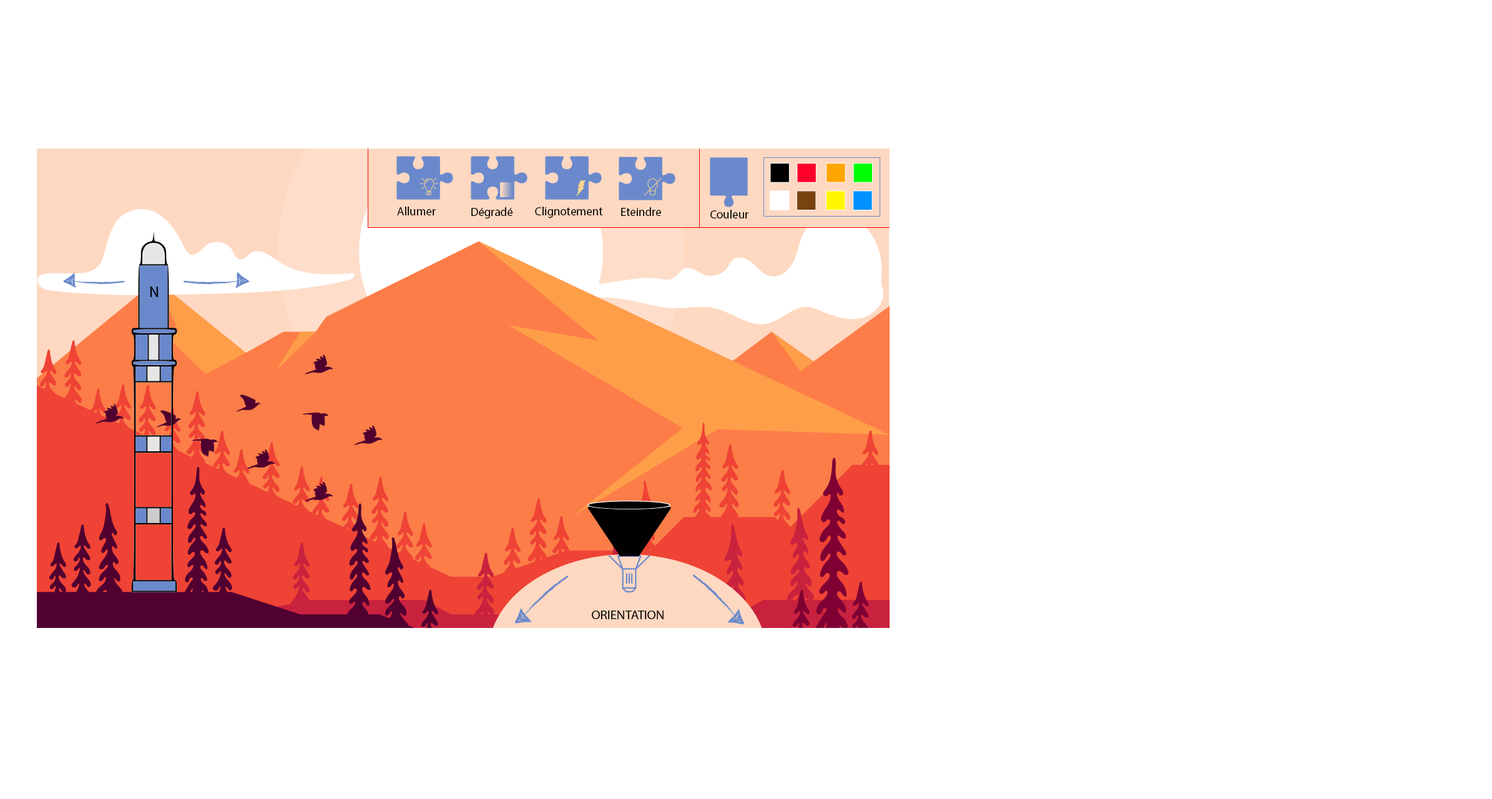
<style>
.page{position:relative;width:1492px;height:799px;background:#ffffff}
.page>*{position:absolute;margin:0}
.t1{font:11.8px "MyriadPro-Regular";color:#000000}
.t2{font:15px "MyriadPro-Regular";color:#000000}
.t3{font:13px "MyriadPro-Regular";color:#000000}
</style>
<div class="page">
<p class="t1" style="left:397px;top:207px;width:39px;height:8px">Allumer</p>
<p class="t1" style="left:471px;top:207px;width:42px;height:12px">Dégradé</p>
<p class="t1" style="left:535px;top:207px;width:67px;height:11px">Clignotement</p>
<p class="t1" style="left:621px;top:207px;width:40px;height:9px">Eteindre</p>
<p class="t1" style="left:710px;top:210px;width:39px;height:9px">Couleur</p>
<p class="t2" style="left:150px;top:287px;width:8px;height:10px">N</p>
<p class="t3" style="left:591px;top:611px;width:73px;height:8px">ORIENTATION</p>
</div>
